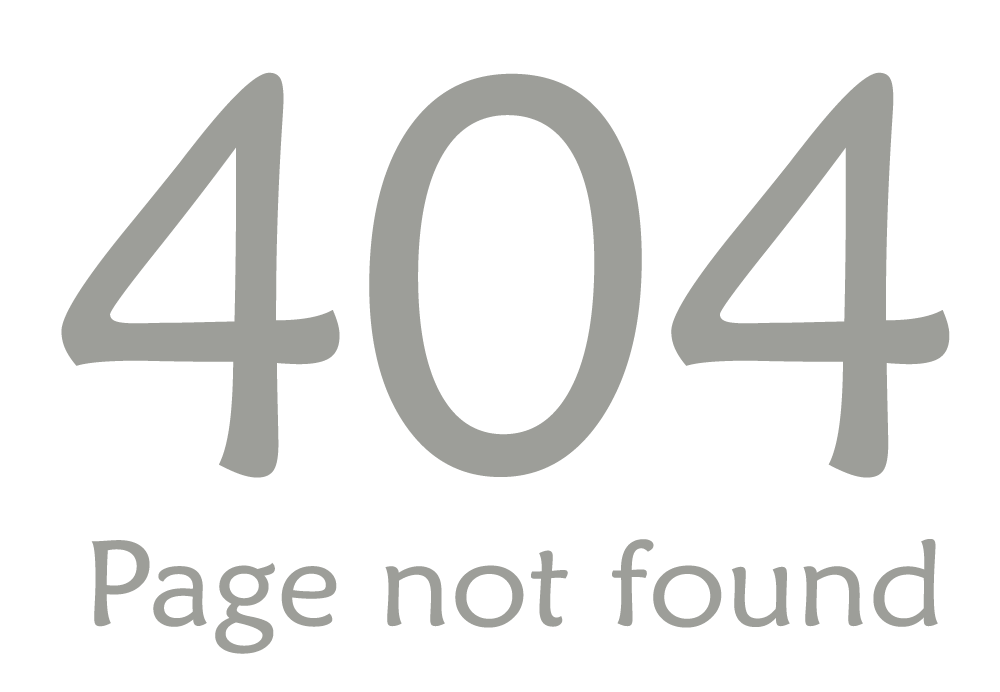
<style>
.page{position:relative;width:1000px;height:692px;background:#ffffff}
.page>*{position:absolute;margin:0}
.t1{font:563.7px "MaiandraGD-Regular";color:#9d9e99;scale:0.94 1}
.t2{font:121.2px "MaiandraGD-Regular";color:#9d9e99;scale:1.06 1}
</style>
<div class="page">
<p class="t1" style="left:61px;top:72px;width:889px;height:406px">404</p>
<p class="t2" style="left:91px;top:539px;width:847px;height:115px">Page not found</p>
</div>
